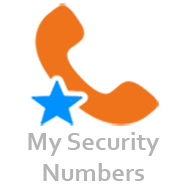
<style>
.page{position:relative;width:188px;height:188px;background:#ffffff}
.page>*{position:absolute;margin:0}
.t1{font:26.1px "Corbel-Bold";color:#b3b4b3}
</style>
<div class="page">
<p class="t1" style="left:28px;top:132px;width:132px;height:49px;text-align:center">My Security<br>Numbers</p>
</div>
